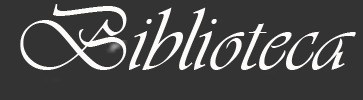
<style>
.page{position:relative;width:363px;height:100px;background:#333333}
.page>*{position:absolute;margin:0}
.t1{font:92.6px "Vivaldii";color:#fdfafa}
</style>
<div class="page">
<p class="t1" style="left:20px;top:4px;width:336px;height:66px">Biblioteca</p>
</div>
